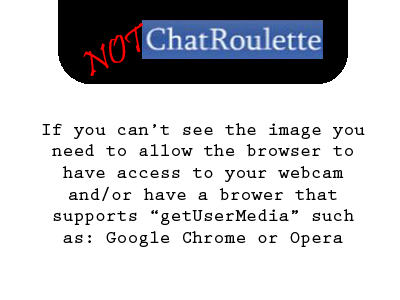
<style>
.page{position:relative;width:400px;height:300px;background:#ffffff}
.page>*{position:absolute;margin:0}
.t1{font:18px "PrestigeEliteStd-Bd";color:#000000}
</style>
<div class="page">
<p class="t1" style="left:42px;top:123px;width:323px;height:124px;text-align:center">If you can’t see the image you need to allow the browser to have access to your webcam and/or have a brower that supports “getUserMedia” such as: Google Chrome or Opera</p>
</div>
